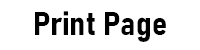
<style>
.page{position:relative;width:200px;height:50px;background:#ffffff}
.page>*{position:absolute;margin:0}
.t1{font:33.5px "Bahnschrift-BoldSemiCondensed";color:#000000;font-style:italic}
</style>
<div class="page">
<p class="t1" style="left:35px;top:11px;width:131px;height:31px">Print Page</p>
</div>
